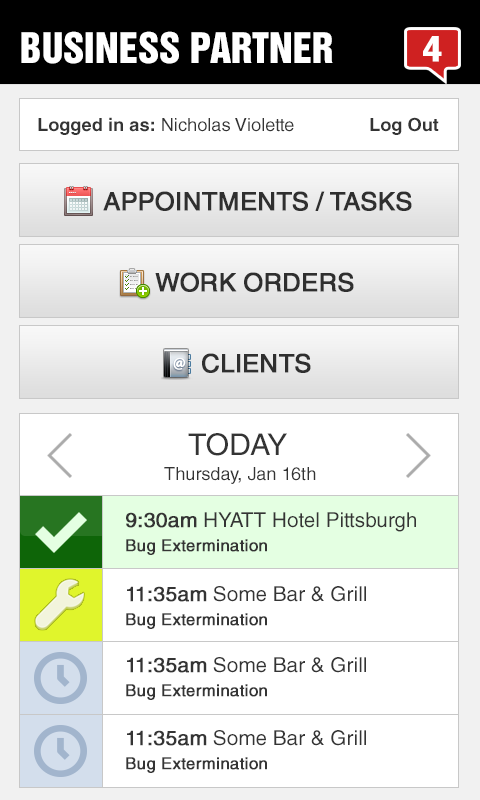
<style>
.page{position:relative;width:480px;height:800px;background:#ffffff}
.page>*{position:absolute;margin:0}
.t1{font:38.5px "HelveticaInseratLTStd-Roman";color:#ffffff}
.t2{font:35px "HelveticaLTStd-Bold";color:#ffffff;font-weight:bold}
.t3{font:18px "HelveticaLTStd-Roman";color:#343434}
.t4{font:18px "HelveticaLTStd-Bold";color:#343434}
.t5{font:25px "HelveticaWorld-Regular";color:#2f2f2f;font-weight:bold}
.t6{font:30px "HelveticaLTStd-Roman";color:#343434}
.t7{font:20.4px "HelveticaLTStd-Roman";color:#343434}
.t8{font:20.4px "HelveticaLTStd-Roman";color:#343434;font-weight:bold}
.t9{font:16.3px "HelveticaLTStd-Roman";color:#343434;font-weight:bold}
</style>
<div class="page">
<p class="t1" style="left:21px;top:31px;width:312px;height:33px">BUSINESS PARTNER</p>
<p class="t2" style="left:423px;top:36px;width:19px;height:26px">4</p>
<p class="t3" style="left:38px;top:117px;width:256px;height:18px"><span class="t4">Logged in as:</span> Nicholas Violette</p>
<p class="t4" style="left:370px;top:117px;width:69px;height:18px">Log Out</p>
<p class="t5" style="left:103px;top:191px;width:309px;height:20px">APPOINTMENTS / TASKS</p>
<p class="t5" style="left:155px;top:272px;width:199px;height:20px">WORK ORDERS</p>
<p class="t5" style="left:202px;top:353px;width:109px;height:20px">CLIENTS</p>
<p class="t6" style="left:188px;top:433px;width:99px;height:23px">TODAY</p>
<p class="t3" style="left:164px;top:467px;width:152px;height:17px">Thursday, Jan 16th</p>
<p class="t7" style="left:126px;top:512px;width:290px;height:20px"><span class="t8">9:30am</span> HYATT Hotel Pittsburgh</p>
<p class="t9" style="left:126px;top:539px;width:141px;height:16px">Bug Extermination</p>
<p class="t7" style="left:127px;top:586px;width:239px;height:16px"><span class="t8">11:35am</span> Some Bar &amp; Grill</p>
<p class="t9" style="left:126px;top:613px;width:141px;height:16px">Bug Extermination</p>
<p class="t7" style="left:127px;top:657px;width:239px;height:16px"><span class="t8">11:35am</span> Some Bar &amp; Grill</p>
<p class="t9" style="left:126px;top:684px;width:141px;height:16px">Bug Extermination</p>
<p class="t7" style="left:127px;top:730px;width:239px;height:16px"><span class="t8">11:35am</span> Some Bar &amp; Grill</p>
<p class="t9" style="left:126px;top:757px;width:141px;height:16px">Bug Extermination</p>
</div>
